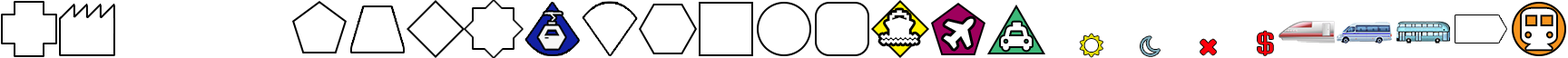
<style>
.page{position:relative;width:1568px;height:58px;background:#ffffff}
.page>*{position:absolute;margin:0}
.t1{font:35.4px "Chalkyer";letter-spacing:-0.06em;color:#fe000c}
</style>
<div class="page">
<p class="t1" style="left:1258px;top:31px;width:15px;height:24px">$</p>
</div>
